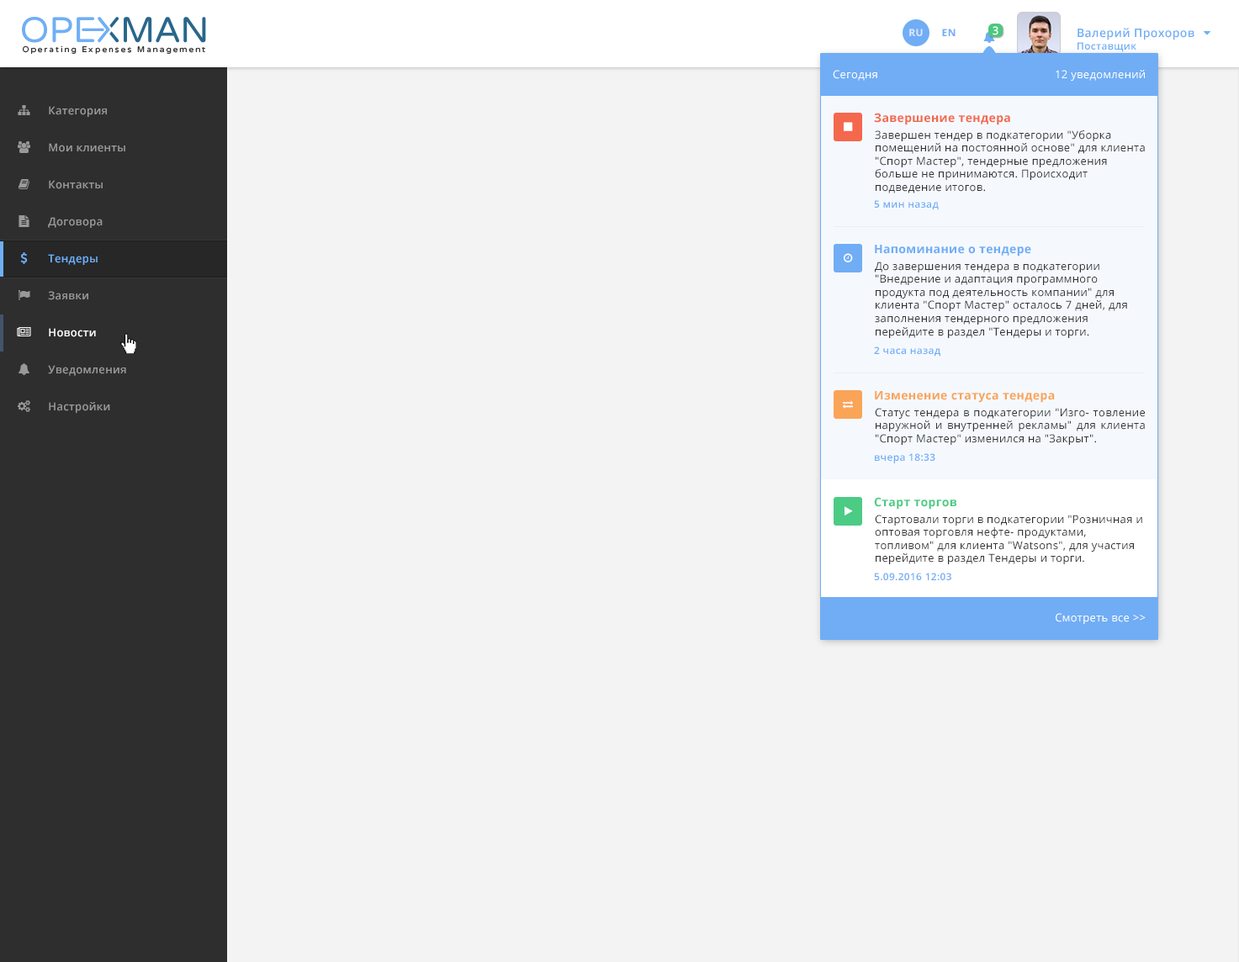
<style>
.page{position:relative;width:1239px;height:962px;background:#f3f3f3}
.page>*{position:absolute;margin:0}
.t1{font:10.1px "OpenSans-Bold";letter-spacing:0.025em;color:#dbe8fc;text-transform:uppercase}
.t2{font:10.1px "OpenSans-Bold";letter-spacing:0.025em;color:#70adf5;text-transform:uppercase}
.t3{font:10.9px "OpenSans-Semibold";letter-spacing:0.025em;color:#ffffff}
.t4{font:11.8px "OpenSans-Semibold";letter-spacing:0.025em;color:#6eaef7}
.t5{font:10.1px "OpenSans-Semibold";letter-spacing:0.025em;color:#6eaef7}
.t6{font:10.9px "OpenSans";letter-spacing:0.025em;color:#ffffff}
.t7{font:10.9px "OpenSans-Semibold";letter-spacing:0.025em;color:#999999}
.t8{font:11.8px "OpenSans-Bold";letter-spacing:0.025em;color:#f4684e}
.t9{font:10.9px "OpenSans";letter-spacing:0.025em;color:#333333}
.t10{font:10.1px "OpenSans-Semibold";letter-spacing:0.025em;color:#70adf5}
.t11{font:11.8px "OpenSans-Bold";letter-spacing:0.025em;color:#70adf5}
.t12{font:10.9px "OpenSans-Semibold";letter-spacing:0.025em;color:#6faff8}
.t13{font:11.8px "OpenSans-Bold";letter-spacing:0.025em;color:#faa458}
.t14{font:11.8px "OpenSans-Bold";letter-spacing:0.025em;color:#4bcb84}
</style>
<div class="page">
<p class="t1" style="left:909px;top:29px;width:14px;height:7px">Ru</p>
<p class="t2" style="left:942px;top:29px;width:14px;height:7px">EN</p>
<p class="t3" style="left:993px;top:26px;width:6px;height:9px">3</p>
<p class="t4" style="left:1078px;top:28px;width:117px;height:24px">Валерий Прохоров<br><span class="t5">Поставщик</span></p>
<p class="t6" style="left:833px;top:70px;width:44px;height:11px">Сегодня</p>
<p class="t6" style="left:1056px;top:70px;width:89px;height:11px">12 уведомлений</p>
<p class="t7" style="left:49px;top:106px;width:58px;height:11px">Категория</p>
<p class="t8" style="left:874px;top:113px;width:136px;height:12px">Завершение тендера</p>
<p class="t9" style="left:875px;top:130px;width:270px;height:63px">Завершен тендер в подкатегории "Уборка помещений на постоянной основе" для клиента "Спорт Мастер", тендерные предложения больше не принимаются. Происходит подведение итогов.</p>
<p class="t7" style="left:49px;top:143px;width:76px;height:9px">Мои клиенты</p>
<p class="t7" style="left:49px;top:180px;width:54px;height:9px">Контакты</p>
<p class="t10" style="left:874px;top:200px;width:65px;height:10px">5 мин назад</p>
<p class="t7" style="left:48px;top:217px;width:55px;height:11px">Договора</p>
<p class="t11" style="left:875px;top:245px;width:156px;height:12px">Напоминание о тендере</p>
<p class="t12" style="left:48px;top:254px;width:50px;height:11px">Тендеры</p>
<p class="t9" style="left:875px;top:262px;width:252px;height:76px">До завершения тендера в подкатегории "Внедрение и адаптация программного продукта под деятельность компании" для клиента "Спорт Мастер" осталось 7 дней, для заполнения тендерного предложения перейдите в раздел "Тендеры и торги.</p>
<p class="t7" style="left:48px;top:291px;width:40px;height:9px">Заявки</p>
<p class="t3" style="left:49px;top:328px;width:47px;height:9px">Новости</p>
<p class="t10" style="left:874px;top:347px;width:66px;height:10px">2 часа назад</p>
<p class="t7" style="left:48px;top:365px;width:78px;height:11px">Уведомления</p>
<p class="t13" style="left:875px;top:391px;width:180px;height:12px">Изменение статуса тендера</p>
<p class="t7" style="left:49px;top:402px;width:61px;height:11px">Настройки</p>
<p class="t9" style="left:875px;top:408px;width:270px;height:37px;text-align:justify">Статус тендера в подкатегории "Изго- товление наружной и внутренней рекламы" для клиента "Спорт Мастер" изменился на "Закрыт".</p>
<p class="t10" style="left:875px;top:453px;width:60px;height:11px">вчера 18:33</p>
<p class="t14" style="left:874px;top:497px;width:83px;height:13px">Старт торгов</p>
<p class="t9" style="left:875px;top:515px;width:267px;height:49px">Стартовали торги в подкатегории "Розничная и оптовая торговля нефте- продуктами, топливом" для клиента "Watsons", для участия перейдите в раздел Тендеры и торги.</p>
<p class="t10" style="left:874px;top:573px;width:77px;height:7px">5.09.2016 12:03</p>
<p class="t6" style="left:1056px;top:613px;width:90px;height:11px">Смотреть все &gt;&gt;</p>
</div>
